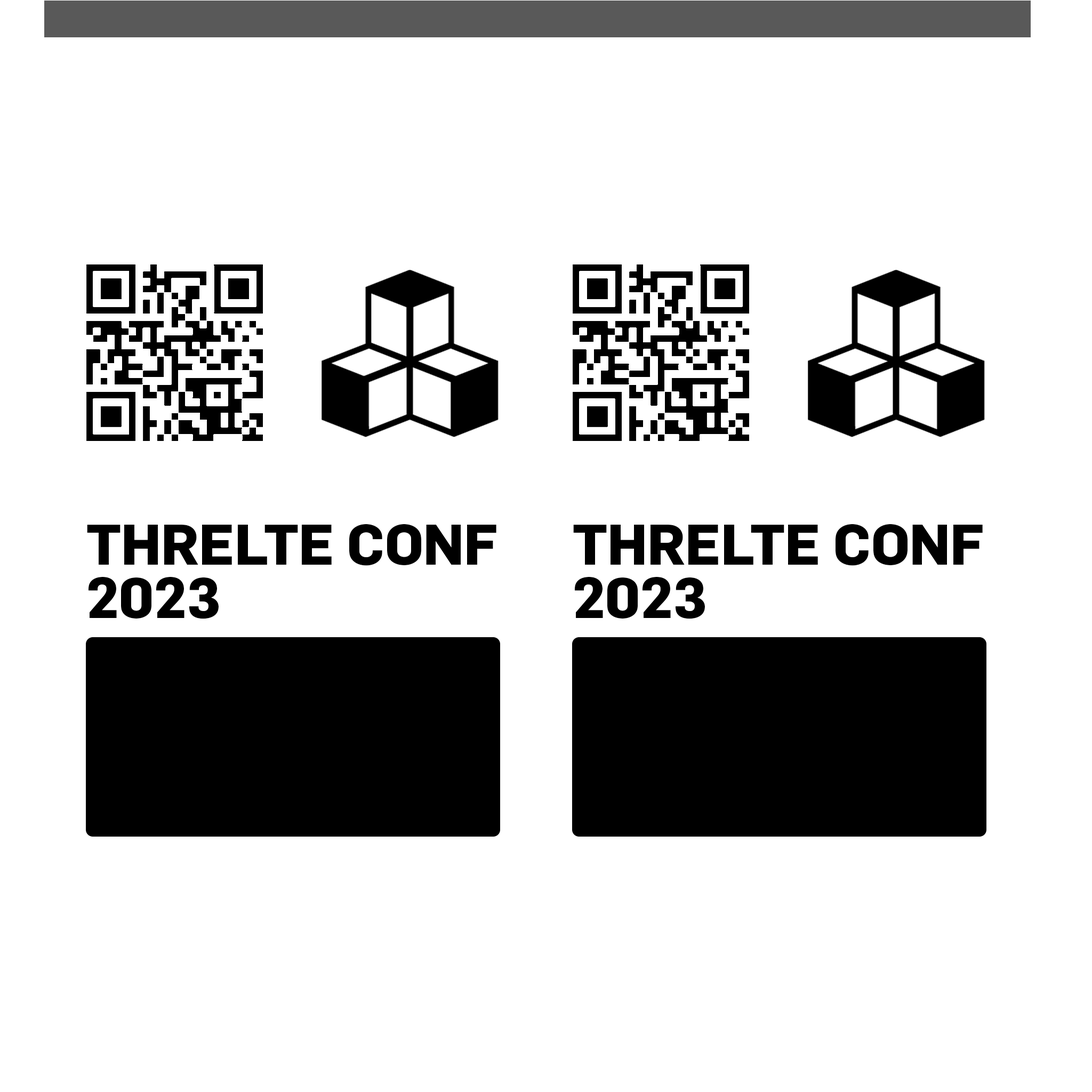
<style>
.page{position:relative;width:1092px;height:1092px;background:#ffffff}
.page>*{position:absolute;margin:0}
.t1{font:56.4px/53.3px "Flama-Bold";letter-spacing:-0.006em;color:#000000}
</style>
<div class="page">
<p class="t1" style="left:87px;top:524px;width:409px;height:95px">THRELTE CONF<br>2023</p>
<p class="t1" style="left:573px;top:524px;width:410px;height:95px">THRELTE CONF<br>2023</p>
</div>
